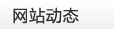
<style>
.page{position:relative;width:114px;height:29px}
.page>*{position:absolute;margin:0}
.t1{font:16px "MicrosoftYaHei";letter-spacing:0.05em;color:#333333}
</style>
<div class="page">
<p class="t1" style="left:13px;top:7px;width:66px;height:17px">网站动态</p>
</div>
